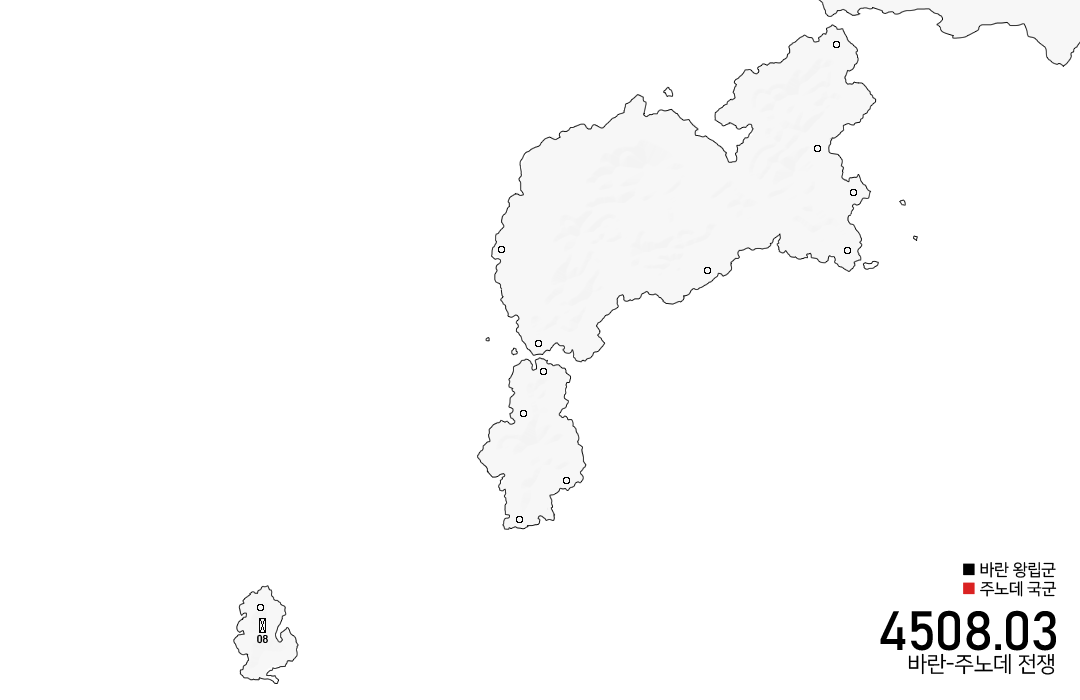
<style>
.page{position:relative;width:1080px;height:700px;background:#ffffff}
.page>*{position:absolute;margin:0}
.t1{font:16.3px/4.8px "NanumSquareR";color:#000000}
.t2{font:16.3px/4.8px "NanumSquareR";color:#da2222}
.t3{font:54.5px "Bahnschrift";color:#000000}
.t4{font:11.3px "Bahnschrift";color:#000000}
.t5{font:21.7px "NanumSquareR";color:#000000}
</style>
<div class="page">
<p class="t1" style="left:963px;top:562px;width:94px;height:35px">■ 바란 왕립군 <br><br><br><br><span class="t2">■</span> 주노데 국군</p>
<p class="t3" style="left:880px;top:610px;width:176px;height:41px">4508.03</p>
<p class="t4" style="left:257px;top:634px;width:11px;height:10px">08</p>
<p class="t5" style="left:908px;top:653px;width:147px;height:22px">바란-주노데 전쟁</p>
</div>
